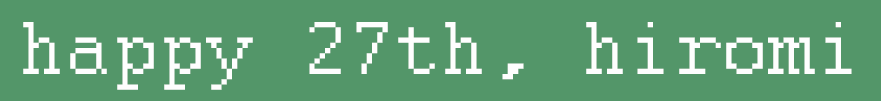
<style>
.page{position:relative;width:881px;height:101px;background:#539669}
.page>*{position:absolute;margin:0}
.t1{font:83.3px "Courier";color:#fefefe}
</style>
<div class="page">
<p class="t1" style="left:23px;top:22px;width:829px;height:68px">happy 27th, hiromi</p>
</div>
